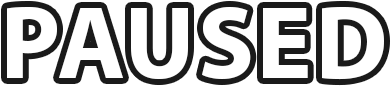
<style>
.page{position:relative;width:391px;height:86px;background:#ffffff}
.page>*{position:absolute;margin:0}
.t1{font:104.2px "MyriadPro-Bold";letter-spacing:0.025em;color:#ffffff}
</style>
<div class="page">
<p class="t1" style="left:7px;top:7px;width:377px;height:73px">PAUSED</p>
</div>
